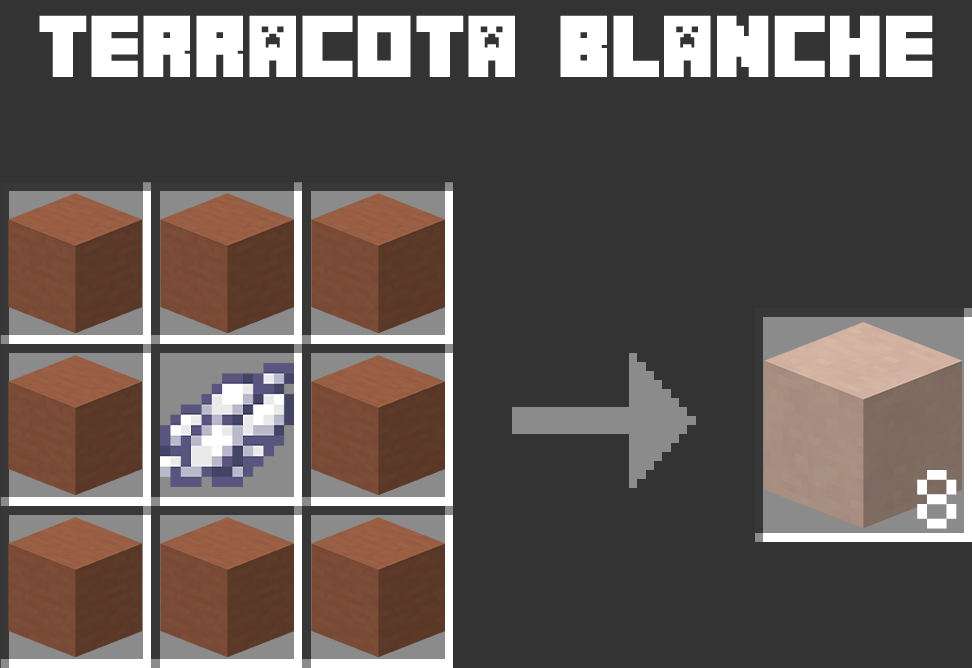
<style>
.page{position:relative;width:972px;height:668px;background:#333333}
.page>*{position:absolute;margin:0}
.t1{font:78px "Minecrafter";color:#ffffff}
.t2{font:78px "Minecraft";color:#ffffff}
</style>
<div class="page">
<p class="t1" style="left:39px;top:15px;width:894px;height:62px">Terracota Blanche</p>
<p class="t2" style="left:917px;top:470px;width:40px;height:59px">8</p>
</div>
